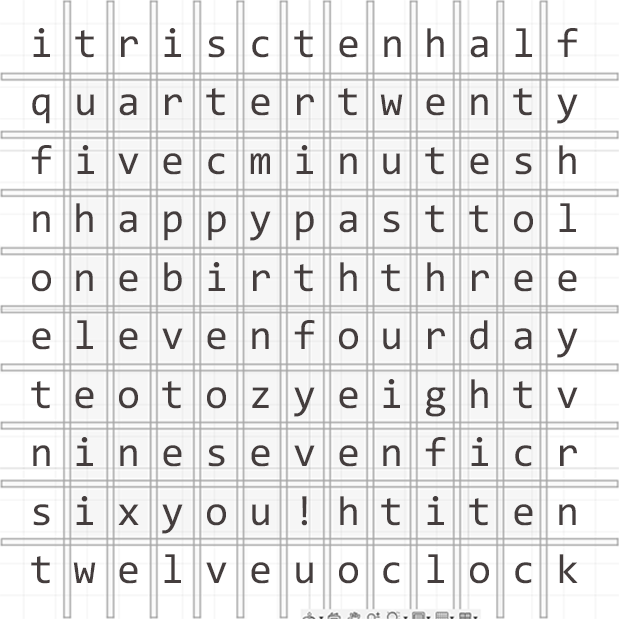
<style>
.page{position:relative;width:619px;height:619px;background:#ffffff}
.page>*{position:absolute;margin:0}
.t1{font:41.8px/58.5px "Consolas";letter-spacing:0.5em;color:#443d3d}
</style>
<div class="page">
<p class="t1" style="left:31px;top:28px;width:547px;height:556px">itrisctenhalf<br>quartertwenty<br>fivecminutesh<br>nhappypasttol<br>onebirththree<br>elevenfourday<br>teotozyeightv<br>ninesevenficr<br>sixyou!htiten<br>twelveuoclock</p>
</div>
